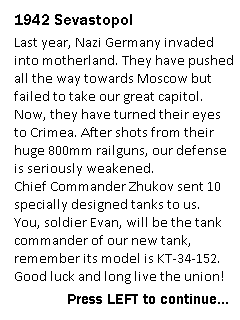
<style>
.page{position:relative;width:240px;height:320px;background:#ffffff}
.page>*{position:absolute;margin:0}
.t1{font:16px "FranklinGothic-Demi";color:#000000}
.t2{font:15px "Calibri";color:#000000}
.t3{font:15px "FranklinGothic-Demi";color:#000000}
</style>
<div class="page">
<p class="t1" style="left:15px;top:14px;width:117px;height:14px">1942 Sevastopol</p>
<p class="t2" style="left:14px;top:37px;width:219px;height:247px">Last year, Nazi Germany invaded<br>into motherland. They have pushed<br>all the way towards Moscow but <br>failed to take our great capitol.<br>Now, they have turned their eyes<br>to Crimea. After shots from their<br>huge 800mm railguns, our defense<br>is seriously weakened.<br>Chief Commander Zhukov sent 10<br>specially designed tanks to us.<br>You, soldier Evan, will be the tank<br>commander of our new tank,<br>remember its model is KT-34-152.<br>Good luck and long live the union!</p>
<p class="t3" style="left:68px;top:294px;width:160px;height:10px">Press LEFT to continue...</p>
</div>
